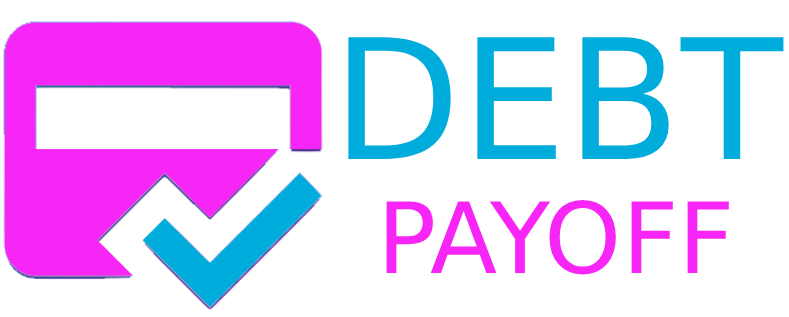
<style>
.page{position:relative;width:789px;height:317px;background:#ffffff}
.page>*{position:absolute;margin:0}
.t1{font:166.9px "Trondheim";color:#00acdc}
.t2{font:98.2px "Trondheim";color:#f726f7}
</style>
<div class="page">
<p class="t1" style="left:348px;top:37px;width:436px;height:122px">DEBT</p>
<p class="t2" style="left:386px;top:200px;width:343px;height:75px">PAYOFF</p>
</div>
